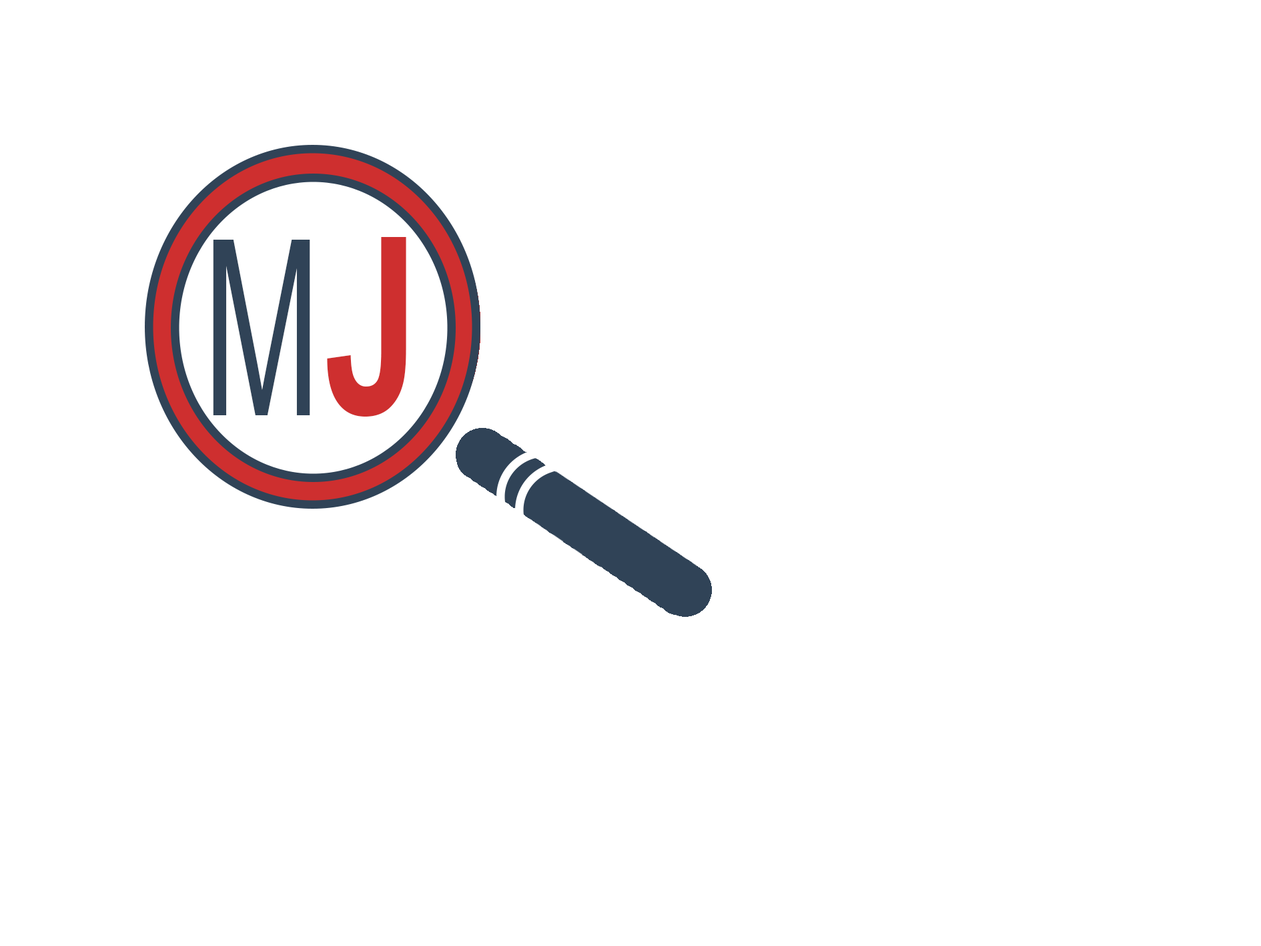
<style>
.page{position:relative;width:1261px;height:946px;background:#ffffff}
.page>*{position:absolute;margin:0}
.t1{font:245.7px "ArialNarrow";color:#304357;scale:0.7 1}
.t2{font:245.5px "Arial-BoldMT";color:#ce2f2f;scale:0.7 1}
</style>
<div class="page">
<p class="t1" style="left:213px;top:240px;width:97px;height:175px">M</p>
<p class="t2" style="left:327px;top:237px;width:79px;height:179px">J</p>
</div>
